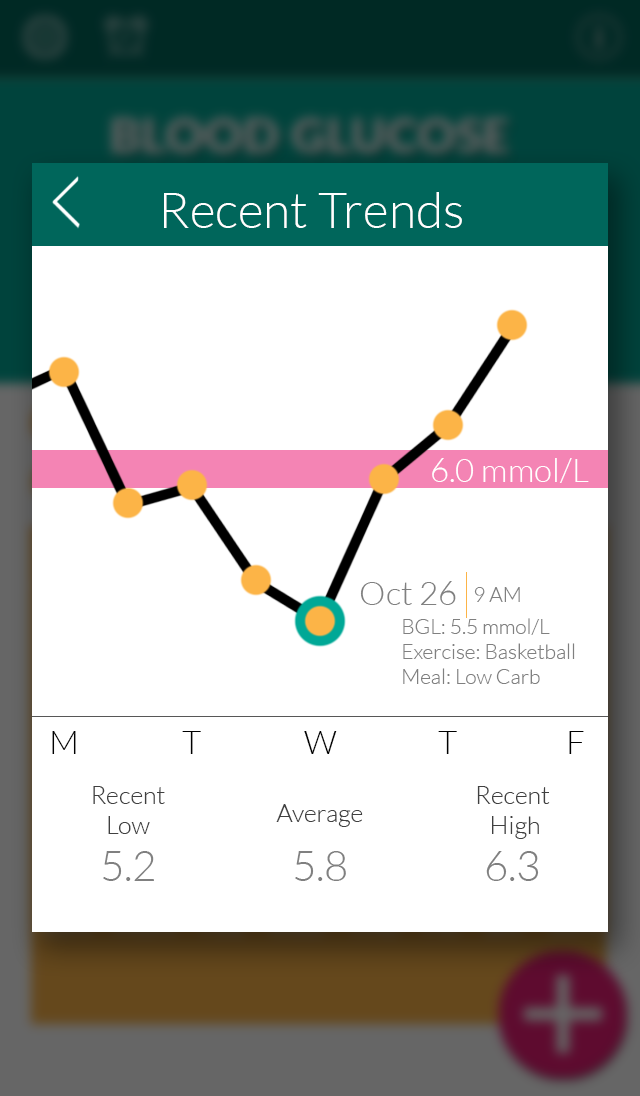
<style>
.page{position:relative;width:640px;height:1096px;background:#ffffff}
.page>*{position:absolute;margin:0}
.t1{font:50px "Lato-Light";color:#ffffff}
.t2{font:33.3px "Lato-Light";color:#ffffff}
.t3{font:33.3px "Lato-Light";color:#808080}
.t4{font:20.8px "Lato-Light";color:#808080}
.t5{font:33.3px "Lato-Light";color:#000000}
.t6{font:25px "Lato-Light";color:#404040}
.t7{font:41.7px "Lato-Light";color:#808080}
</style>
<div class="page">
<p class="t1" style="left:164px;top:192px;width:298px;height:36px">Recent Trends</p>
<p class="t2" style="left:432px;top:458px;width:157px;height:25px">6.0 mmol/L</p>
<p class="t3" style="left:360px;top:581px;width:96px;height:24px">Oct 26</p>
<p class="t4" style="left:474px;top:587px;width:46px;height:15px">9 AM</p>
<p class="t4" style="left:403px;top:618px;width:172px;height:66px">BGL: 5.5 mmol/L<br>Exercise: Basketball<br>Meal: Low Carb</p>
<p class="t5" style="left:52px;top:731px;width:24px;height:23px">M</p>
<p class="t5" style="left:182px;top:731px;width:19px;height:23px">T</p>
<p class="t5" style="left:304px;top:731px;width:33px;height:23px">W</p>
<p class="t5" style="left:438px;top:731px;width:19px;height:23px">T</p>
<p class="t5" style="left:569px;top:731px;width:15px;height:23px">F</p>
<p class="t6" style="left:93px;top:786px;width:72px;height:48px;text-align:center">Recent<br>Low</p>
<p class="t6" style="left:477px;top:786px;width:73px;height:53px;text-align:center">Recent <br>High</p>
<p class="t6" style="left:276px;top:804px;width:87px;height:23px">Average</p>
<p class="t7" style="left:103px;top:851px;width:51px;height:30px">5.2</p>
<p class="t7" style="left:295px;top:851px;width:51px;height:30px">5.8</p>
<p class="t7" style="left:486px;top:851px;width:53px;height:30px">6.3</p>
</div>
